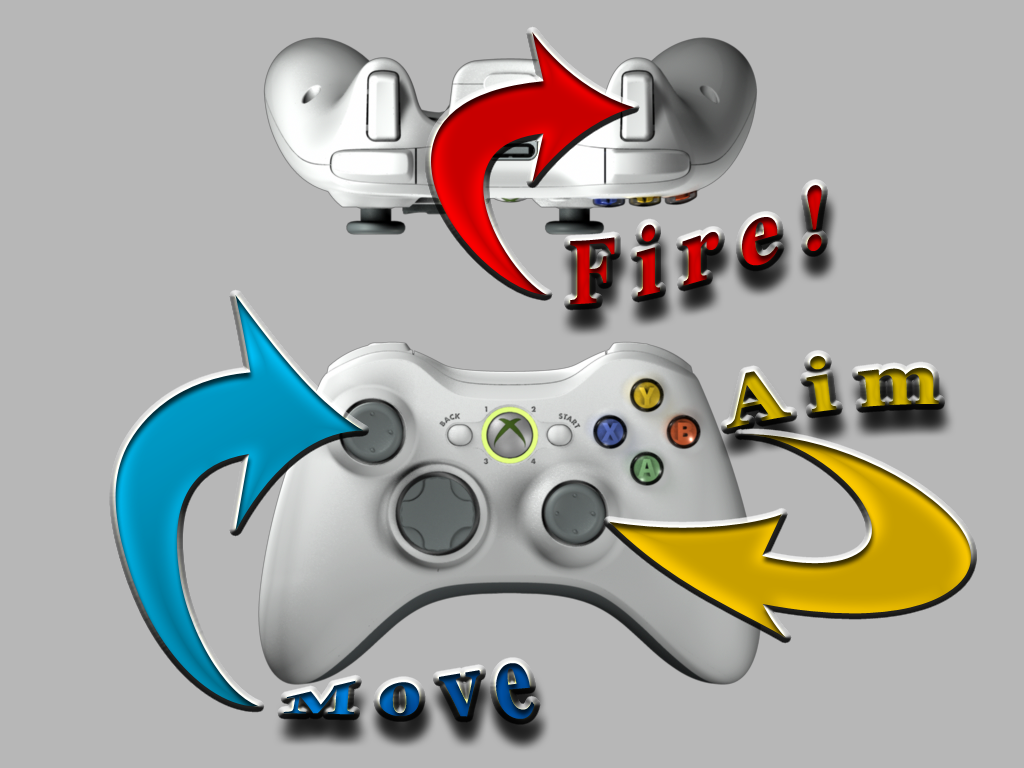
<style>
.page{position:relative;width:1024px;height:768px;background:#b7b7b7}
.page>*{position:absolute;margin:0}
.t1{font:90.6px "Georgia-Bold";letter-spacing:0.28em;scale:0.79 1}
.t2{font:72px "Georgia-Bold";letter-spacing:0.28em}
</style>
<div class="page">
<p class="t1" style="left:570px;top:185px;width:252px;height:120px">Fire!</p>
<p class="t2" style="left:726px;top:356px;width:213px;height:73px">Aim</p>
<p class="t2" style="left:283px;top:663px;width:252px;height:56px">Move</p>
</div>
